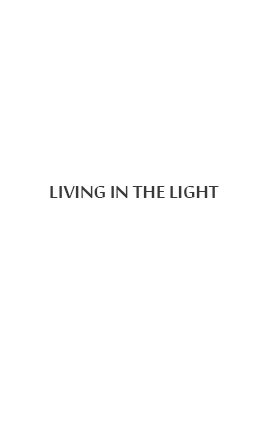
<style>
.page{position:relative;width:270px;height:424px;background:#ffffff}
.page>*{position:absolute;margin:0}
.t1{font:24px "SakkalMajalla-Bold";color:#393939;text-transform:uppercase}
</style>
<div class="page">
<p class="t1" style="left:50px;top:186px;width:169px;height:12px">Living in the Light</p>
</div>
